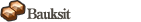
<style>
.page{position:relative;width:141px;height:22px;background:#ffffff}
.page>*{position:absolute;margin:0}
.t1{font:14px "RyuminPro-ExBold";letter-spacing:-0.08em;color:#4c4741}
</style>
<div class="page">
<p class="t1" style="left:27px;top:8px;width:44px;height:12px">Bauksit</p>
</div>
